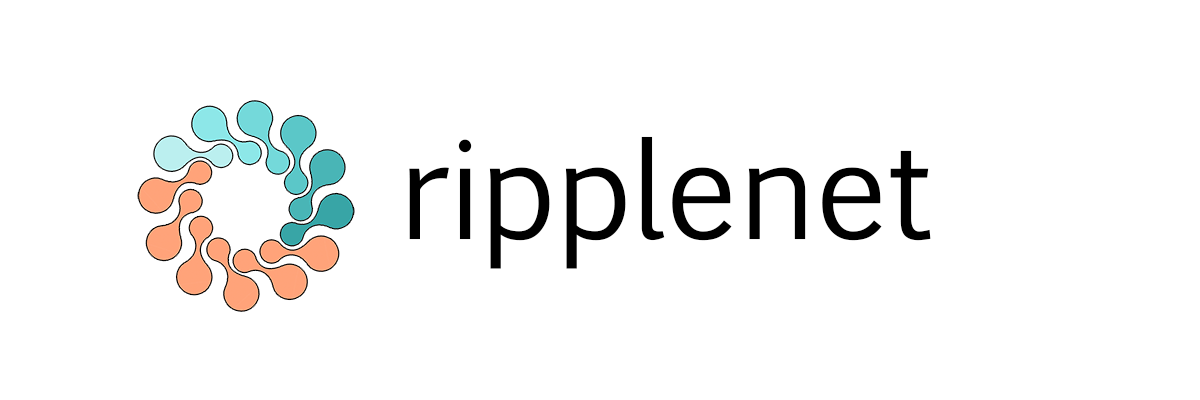
<style>
.page{position:relative;width:1200px;height:400px;background:#ffffff}
.page>*{position:absolute;margin:0}
.t1{font:133.3px "EuphemiaUCAS";color:#000000}
</style>
<div class="page">
<p class="t1" style="left:409px;top:136px;width:522px;height:133px">ripplenet</p>
</div>
